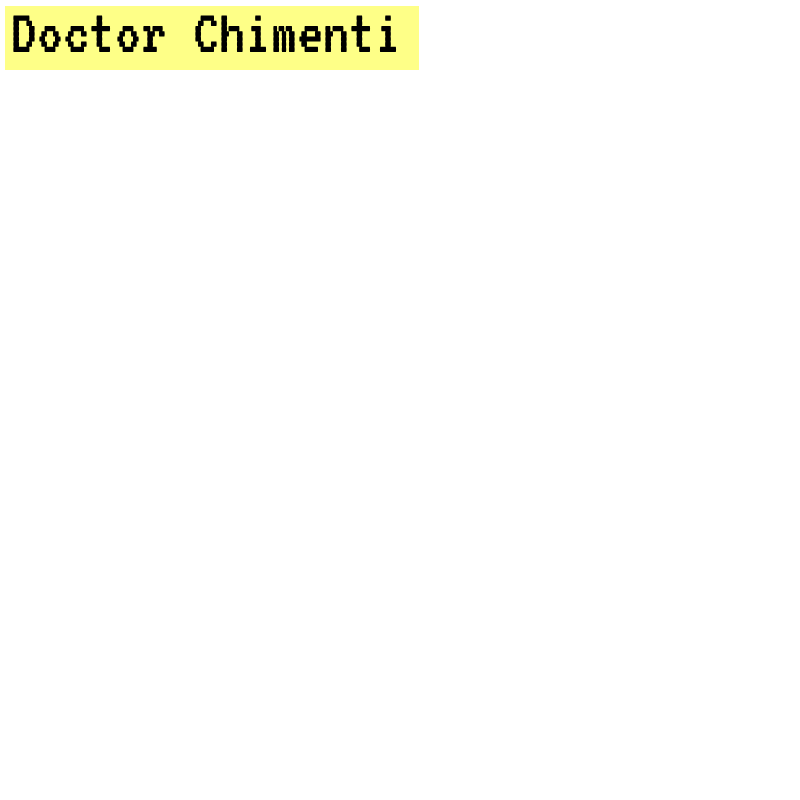
<style>
.page{position:relative;width:800px;height:800px;background:#ffffff}
.page>*{position:absolute;margin:0}
.t1{font:65px "VT323-Regular";color:#000000}
</style>
<div class="page">
<p class="t1" style="left:13px;top:15px;width:384px;height:37px">Doctor Chimenti</p>
</div>
